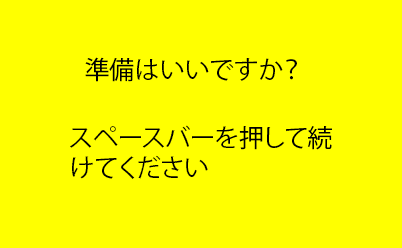
<style>
.page{position:relative;width:402px;height:248px;background:#ffff00}
.page>*{position:absolute;margin:0}
.t1{font:25px "KozGoPr6N-Regular";color:#000000}
</style>
<div class="page">
<p class="t1" style="left:85px;top:57px;width:212px;height:25px">準備はいいですか？</p>
<p class="t1" style="left:70px;top:125px;width:262px;height:54px">スペースバーを押して続<br>けてください</p>
</div>
